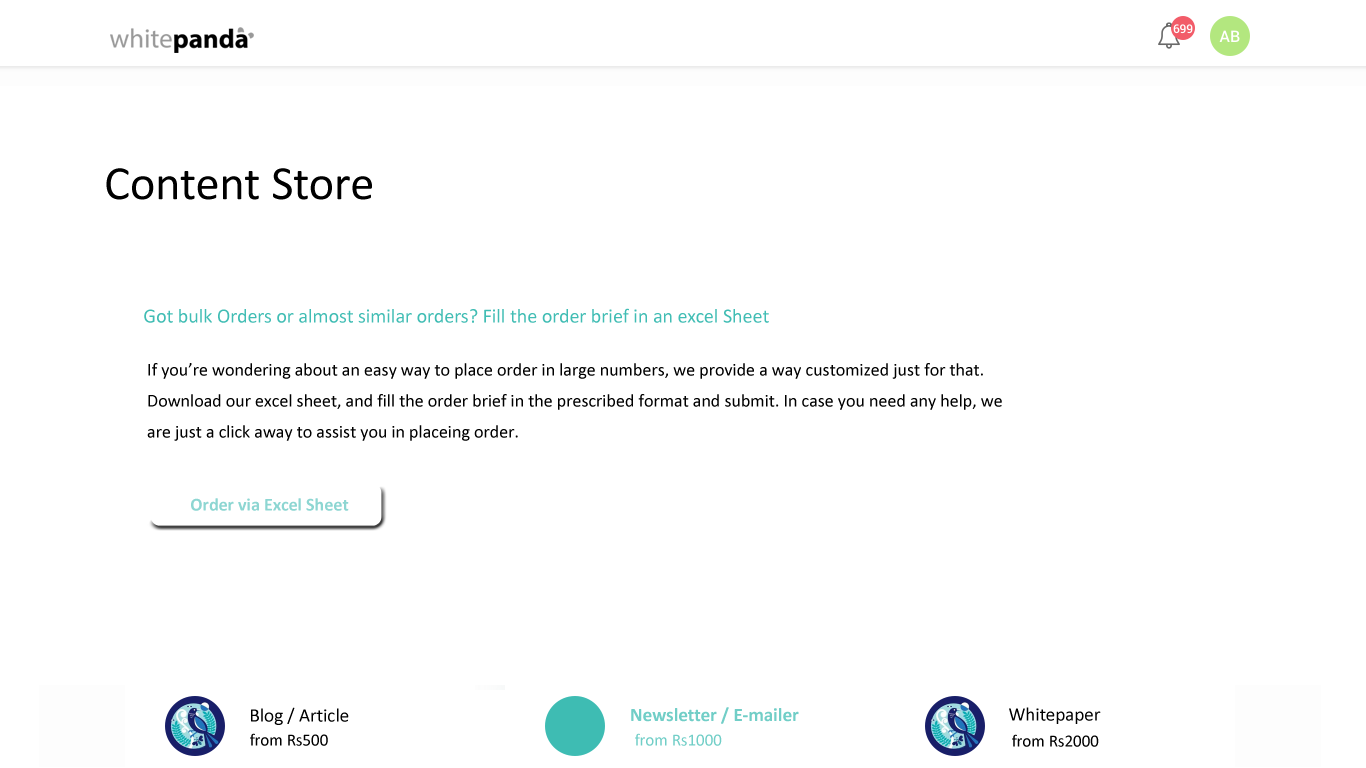
<style>
.page{position:relative;width:1366px;height:768px;background:#ffffff}
.page>*{position:absolute;margin:0}
.t1{font:48px "Calibri";color:#000000}
.t2{font:20px "Calibri";color:#41bdb4}
.t3{font:18px/31px "Calibri";color:#000000}
.t4{font:18px "Calibri-Bold";color:#8dd6d2}
.t5{font:19px "Calibri";color:#000000}
.t6{font:19px "Calibri-Bold";color:#71cec7}
.t7{font:17px "Calibri";color:#000000}
.t8{font:17px "Calibri";color:#71cec7}
</style>
<div class="page">
<p class="t1" style="left:106px;top:168px;width:266px;height:32px">Content Store</p>
<p class="t2" style="left:144px;top:308px;width:625px;height:15px">Got bulk Orders or almost similar orders? Fill the order brief in an excel Sheet</p>
<p class="t3" style="left:147px;top:363px;width:855px;height:78px">If you’re wondering about an easy way to place order in large numbers, we provide a way customized just for that.<br>Download our excel sheet, and fill the order brief in the prescribed format and submit. In case you need any help, we<br>are just a click away to assist you in placeing order.</p>
<p class="t4" style="left:191px;top:498px;width:158px;height:13px">Order via Excel Sheet</p>
<p class="t5" style="left:251px;top:707px;width:98px;height:18px">Blog / Article</p>
<p class="t6" style="left:631px;top:707px;width:168px;height:17px">Newsletter / E-mailer</p>
<p class="t5" style="left:1009px;top:707px;width:92px;height:17px">Whitepaper</p>
<p class="t7" style="left:250px;top:733px;width:78px;height:13px">from Rs500</p>
<p class="t8" style="left:635px;top:733px;width:87px;height:13px">from Rs1000</p>
<p class="t7" style="left:1012px;top:734px;width:87px;height:13px">from Rs2000</p>
</div>
